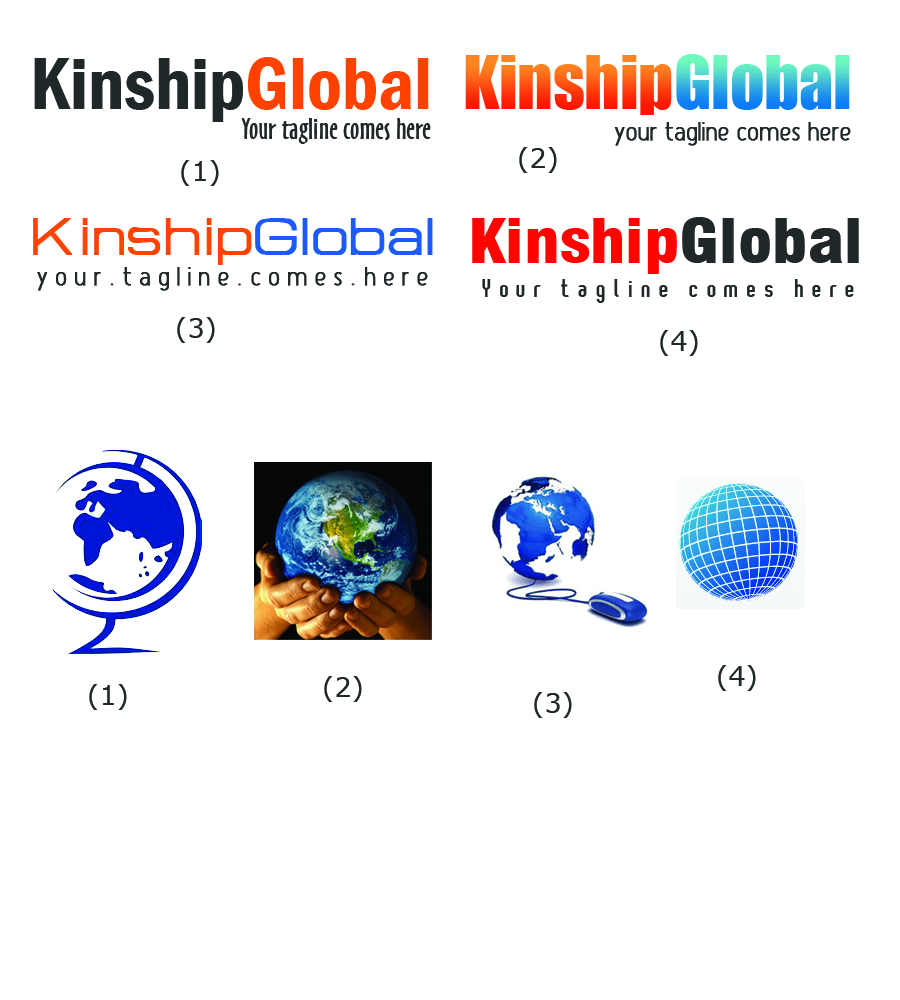
<style>
.page{position:relative;width:900px;height:1000px;background:#ffffff}
.page>*{position:absolute;margin:0}
.t1{font:67.5px "Impact"}
.t2{font:75.5px "FranklinGothic-DemiCond";color:#202728}
.t3{font:75.5px "FranklinGothic-DemiCond";color:#ff4200}
.t4{font:27.6px "OzHandicraftBT-Roman";color:#202728;scale:1.17 1}
.t5{font:21.6px "Atype1";color:#202728;font-weight:bold;scale:1.17 1}
.t6{font:27.5px "Verdana";color:#202728}
.t7{font:63.5px "HURTMOLD";color:#ff4200;font-weight:bold}
.t8{font:63.5px "HURTMOLD";color:#1c5aff;font-weight:bold}
.t9{font:59.6px "Swiss721BT-BlackCondensed";color:#ff0300;scale:1.17 1}
.t10{font:59.6px "Swiss721BT-BlackCondensed";color:#202728;scale:1.17 1}
.t11{font:21.6px "AxeHand";color:#202728;font-weight:bold;scale:1.17 1}
.t12{font:23.6px "Pixochrome";color:#202728;scale:1.17 1}
</style>
<div class="page">
<p class="t1" style="left:676px;top:54px;width:174px;height:56px">Global</p>
<p class="t2" style="left:34px;top:57px;width:395px;height:65px">Kinship<span class="t3">Global</span></p>
<p class="t1" style="left:465px;top:55px;width:207px;height:60px">Kinship</p>
<p class="t4" style="left:241px;top:118px;width:190px;height:26px">Your tagline comes here</p>
<p class="t5" style="left:614px;top:122px;width:237px;height:24px">Your tagline comes here</p>
<p class="t6" style="left:519px;top:147px;width:38px;height:26px">(2)</p>
<p class="t6" style="left:181px;top:160px;width:38px;height:26px">(1)</p>
<p class="t7" style="left:33px;top:218px;width:400px;height:47px">Kinship<span class="t8">Global</span></p>
<p class="t9" style="left:472px;top:217px;width:387px;height:57px">Kinship<span class="t10">Global</span></p>
<p class="t5" style="left:37px;top:267px;width:391px;height:24px">Y o u r<span class="t11"> . </span>t a g l i n e<span class="t11"> . </span>c o m e s<span class="t11"> . </span>h e r e</p>
<p class="t12" style="left:482px;top:279px;width:372px;height:24px">Y o u r    t a g l i n e   c o m e s   h e r  e</p>
<p class="t6" style="left:177px;top:317px;width:38px;height:26px">(3)</p>
<p class="t6" style="left:660px;top:330px;width:38px;height:26px">(4)</p>
<p class="t6" style="left:718px;top:665px;width:38px;height:26px">(4)</p>
<p class="t6" style="left:324px;top:676px;width:38px;height:26px">(2)</p>
<p class="t6" style="left:89px;top:684px;width:38px;height:26px">(1)</p>
<p class="t6" style="left:534px;top:692px;width:38px;height:26px">(3)</p>
</div>
